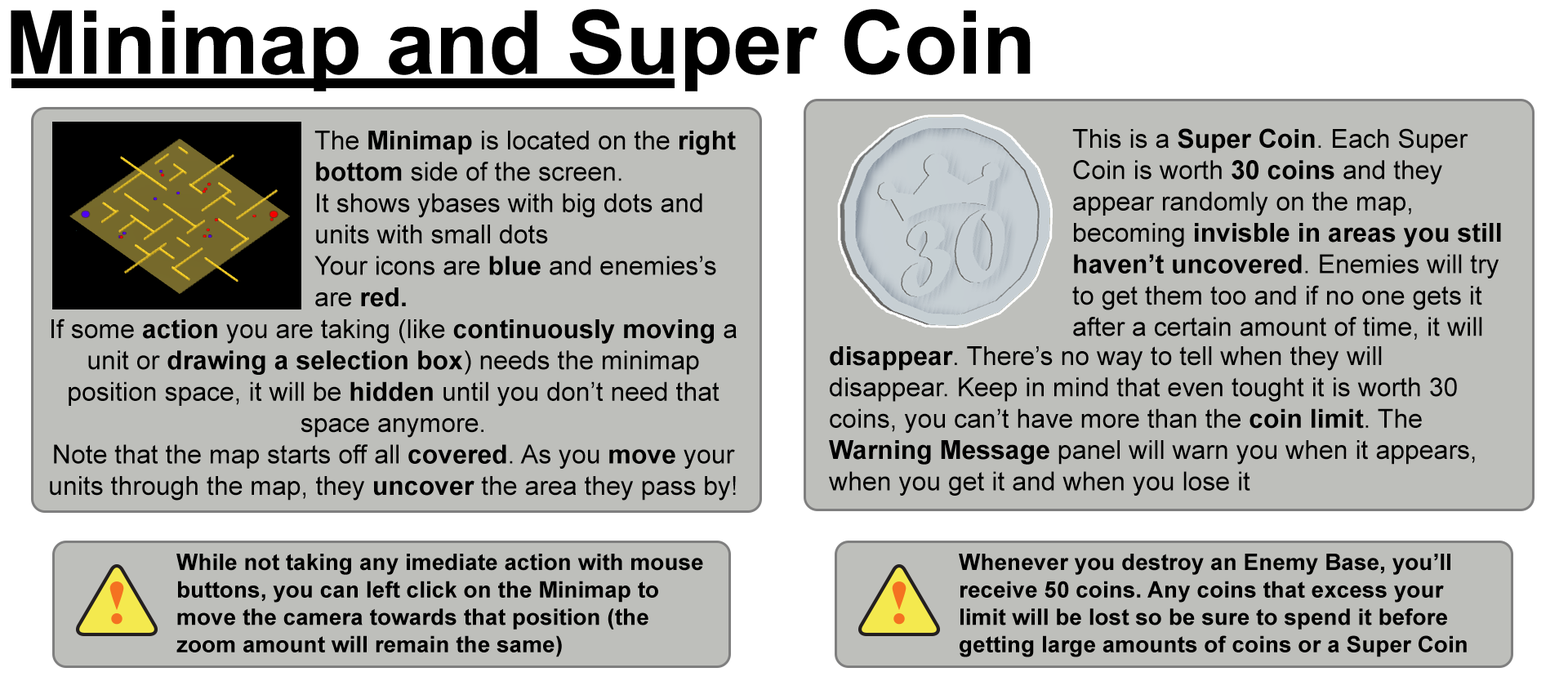
<style>
.page{position:relative;width:1568px;height:699px;background:#bebfbb}
.page>*{position:absolute;margin:0}
.t1{font:87.9px "Arial-BoldMT";color:#000000}
.t2{font:26.1px "ArialMT";color:#000000}
.t3{font:26.1px "Arial-BoldMT";color:#000000}
.t4{font:22.9px "Arial-BoldMT";color:#000000}
</style>
<div class="page">
<p class="t1" style="left:11px;top:9px;width:1020px;height:82px">Minimap and Super Coin</p>
<p class="t2" style="left:314px;top:131px;width:422px;height:176px">The <span class="t3">Minimap </span>is located on the <span class="t3">right bottom </span>side of the screen.<br>It shows ybases with big dots and units with small dots<br>Your icons are <span class="t3">blue </span>and enemies’s are <span class="t3">red.</span></p>
<p class="t2" style="left:1072px;top:128px;width:429px;height:213px">This is a <span class="t3">Super Coin</span>. Each Super Coin is worth <span class="t3">30 coins</span> and they appear randomly on the map, becoming <span class="t3">invisble in areas you still haven’t uncovered</span>. Enemies will try to get them too and if no one gets it after a certain amount of time, it will disappear. There’s no way to tell when they will disappear, whatever happens with the coin, a message will appear on the Warning Message</p>
<p class="t2" style="left:50px;top:318px;width:687px;height:183px;text-align:center">If some <span class="t3">action </span>you are taking (like <span class="t3">continuously moving </span>a unit or <span class="t3">drawing a selection box</span>) needs the minimap position space, it will be <span class="t3">hidden </span>until you don’t need that space anymore.<br>Note that the map starts off all <span class="t3">covered</span>. As you <span class="t3">move</span> your units through the map, they <span class="t3">uncover</span> the area they pass by!</p>
<p class="t2" style="left:829px;top:346px;width:646px;height:150px"><span class="t3">disappear</span>. There’s no way to tell when they will disappear. Keep in mind that even tought it is worth 30 coins, you can’t have more than the <span class="t3">coin limit</span>. The <span class="t3">Warning Message</span> panel will warn you when it appears, when you get it and when you lose it</p>
<p class="t4" style="left:176px;top:554px;width:527px;height:103px">While not taking any imediate action with mouse buttons, you can left click on the Minimap to move the camera towards that position (the zoom amount will remain the same)</p>
<p class="t4" style="left:959px;top:554px;width:508px;height:103px">Whenever you destroy an Enemy Base, you’ll receive 50 coins. Any coins that excess your limit will be lost so be sure to spend it before getting large amounts of coins or a Super Coin</p>
</div>
